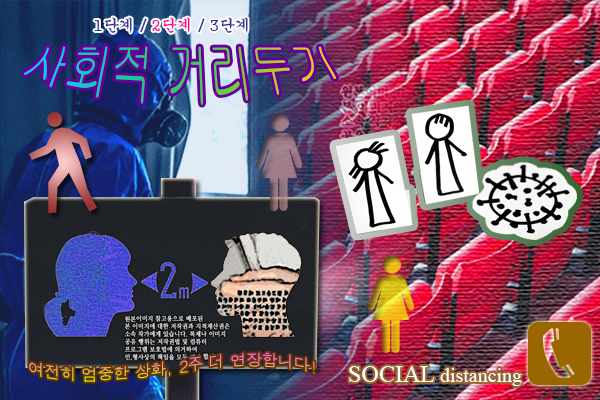
<style>
.page{position:relative;width:600px;height:400px}
.page>*{position:absolute;margin:0}
.t1{font:16px "Gungsuh";color:#333399}
.t2{font:16px "Gungsuh";color:#ff0099}
.t3{font:40px "Gulim"}
.t4{font:16px/4px "Dotum"}
.t5{font:20px "TimesNewRomanPSMT";color:#ffffff}
.t6{font:24px "TimesNewRomanPSMT";color:#ffffff}
</style>
<div class="page">
<p class="t1" style="left:94px;top:17px;width:154px;height:16px">1단계 / <span class="t2">2단계</span> / 3단계</p>
<p class="t3" style="left:23px;top:46px;width:313px;height:59px">사회적 거리두기</p>
<p class="t4" style="left:29px;top:352px;width:286px;height:30px">여전히 엄중한 상화, 2주 더 연장합니다!</p>
<p class="t5" style="left:349px;top:366px;width:173px;height:20px"><span class="t6">SOCIAL </span>distancing</p>
</div>
